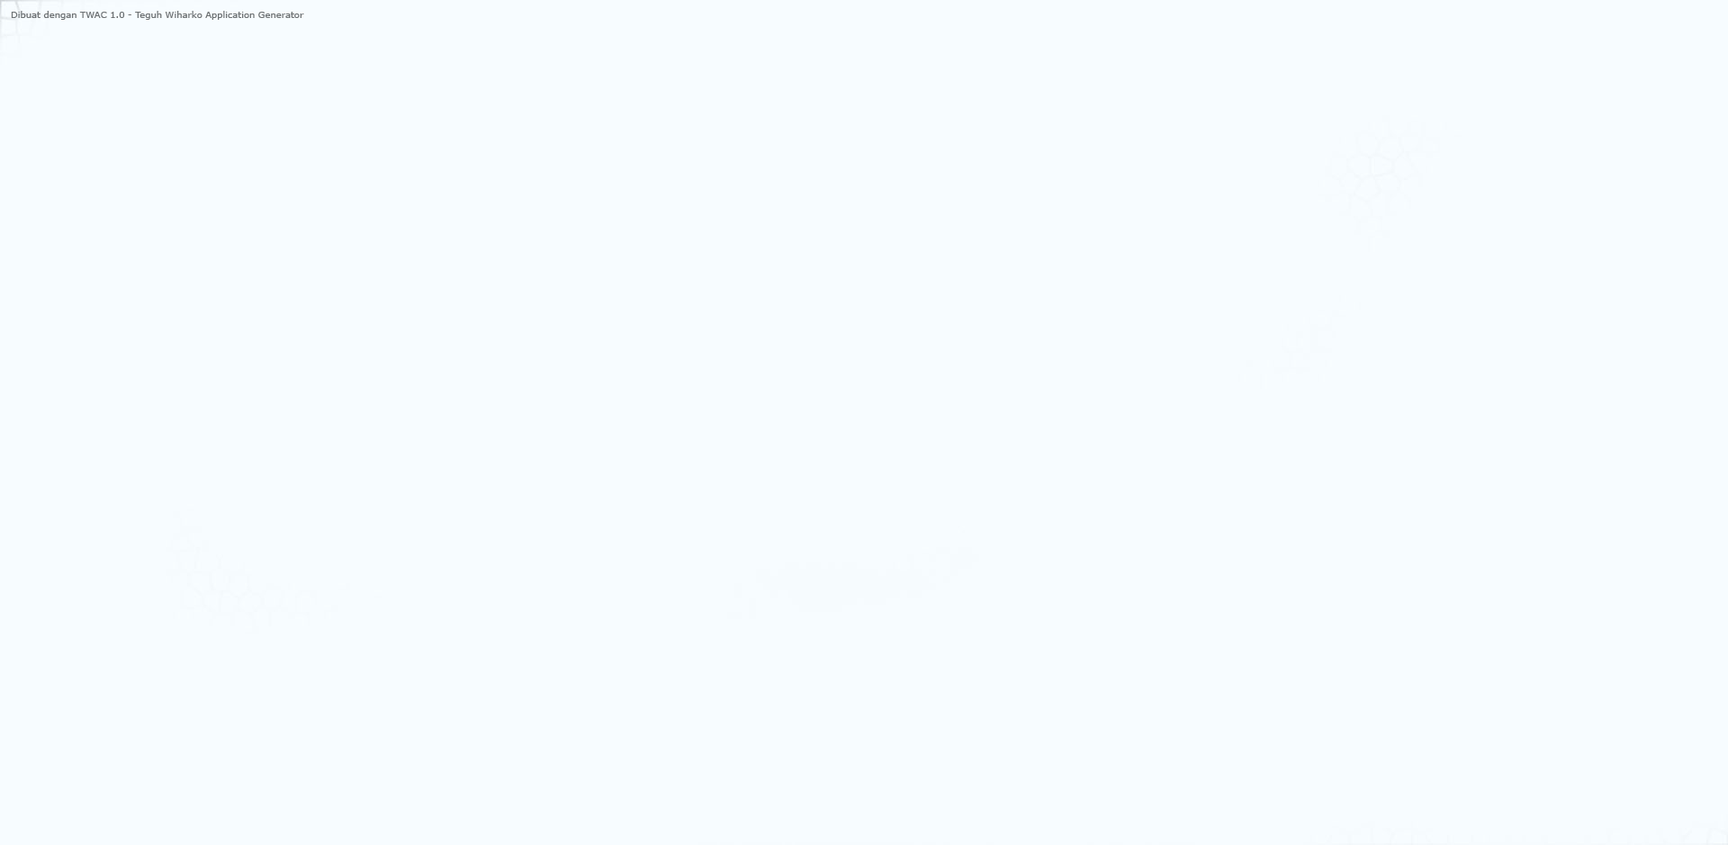
<style>
.page{position:relative;width:1728px;height:845px;background:#f7fcff}
.page>*{position:absolute;margin:0}
.t1{font:9px "Verdana";color:#6d7173}
</style>
<div class="page">
<p class="t1" style="left:11px;top:11px;width:293px;height:9px">Dibuat dengan TWAC 1.0 - Teguh Wiharko Application Generator</p>
</div>
